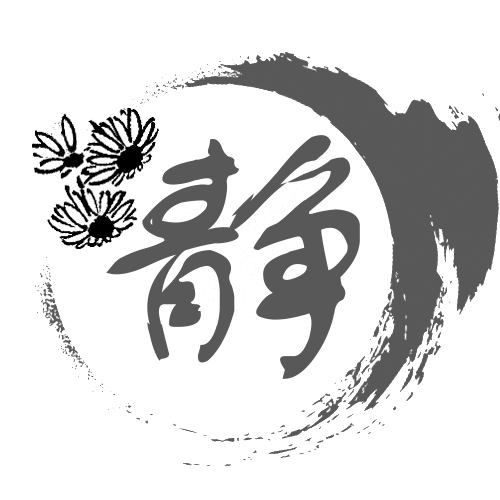
<style>
.page{position:relative;width:500px;height:500px;background:#ffffff}
.page>*{position:absolute;margin:0}
.t1{font:289.4px "FZSTK--GBK1-0";color:#585858;scale:1.07 1}
</style>
<div class="page">
<p class="t1" style="left:106px;top:135px;width:254px;height:244px">静</p>
</div>
